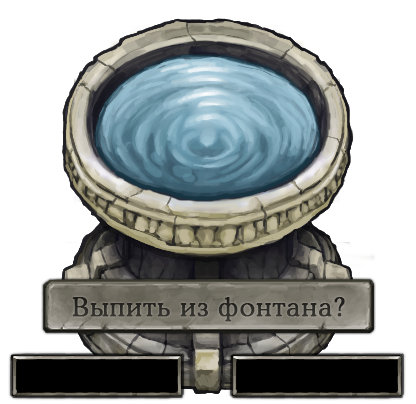
<style>
.page{position:relative;width:416px;height:404px;background:#ffffff}
.page>*{position:absolute;margin:0}
.t1{font:26.3px "CooperLightCBT";letter-spacing:0.03em;color:#2d2c27;font-weight:bold}
</style>
<div class="page">
<p class="t1" style="left:72px;top:297px;width:273px;height:25px">Выпить из фонтана?</p>
</div>
